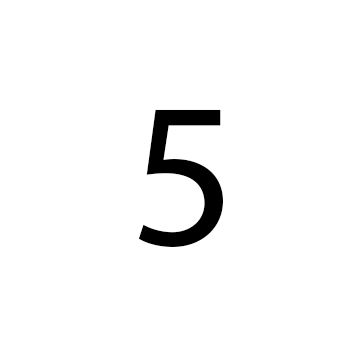
<style>
.page{position:relative;width:354px;height:354px;background:#ffffff}
.page>*{position:absolute;margin:0}
.t1{font:208.3px "MyriadPro-Regular";color:#000000}
</style>
<div class="page">
<p class="t1" style="left:138px;top:109px;width:85px;height:138px">5</p>
</div>
